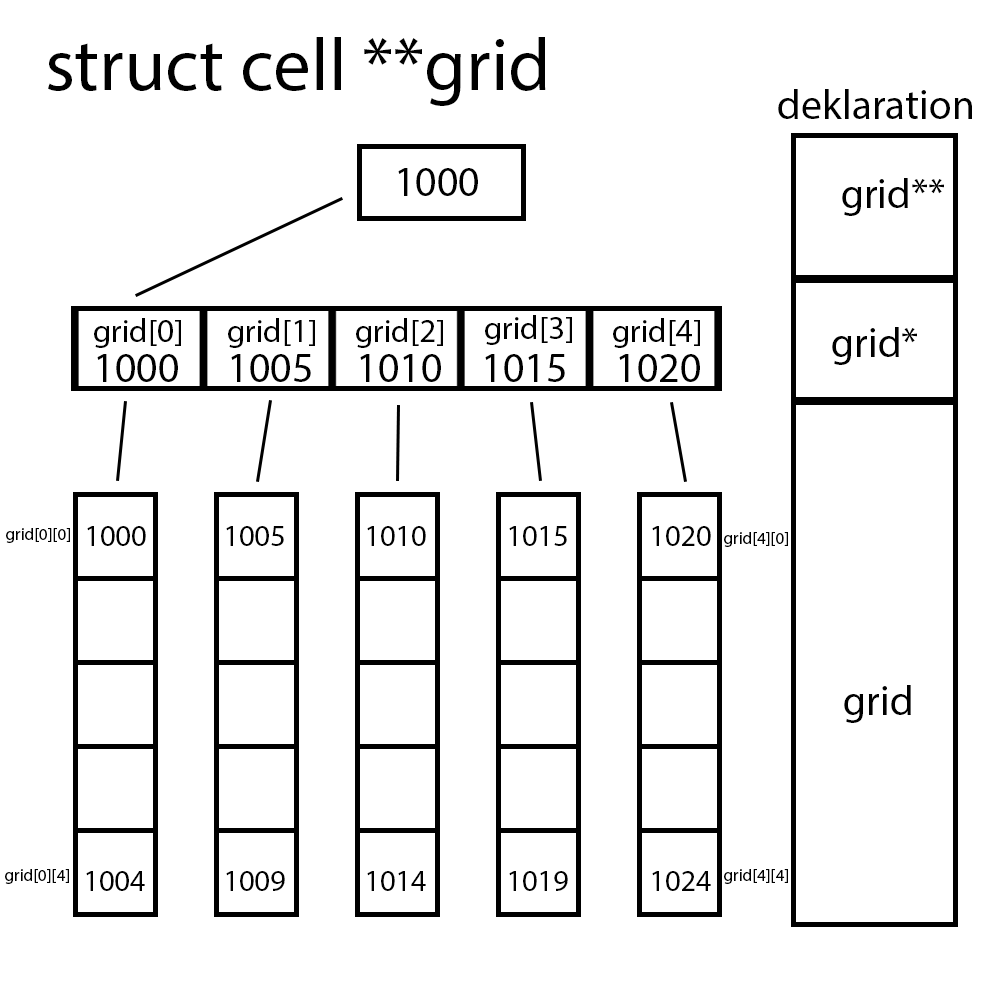
<style>
.page{position:relative;width:1000px;height:1000px;background:#ffffff}
.page>*{position:absolute;margin:0}
.t1{font:75px "MyriadPro-Regular";color:#000000}
.t2{font:41.7px "MyriadPro-Regular";color:#000000}
.t3{font:32.8px "MyriadPro-Regular";color:#000000}
.t4{font:17px "MyriadPro-Regular";color:#000000}
.t5{font:30.3px "MyriadPro-Regular";color:#000000}
</style>
<div class="page">
<p class="t1" style="left:48px;top:37px;width:498px;height:69px">struct cell **grid</p>
<p class="t2" style="left:778px;top:89px;width:194px;height:30px">deklaration</p>
<p class="t2" style="left:398px;top:168px;width:80px;height:28px">1000</p>
<p class="t2" style="left:842px;top:178px;width:102px;height:38px">grid**</p>
<p class="t3" style="left:94px;top:318px;width:87px;height:30px">grid[0]</p>
<p class="t3" style="left:228px;top:318px;width:87px;height:30px">grid[1]</p>
<p class="t3" style="left:356px;top:318px;width:87px;height:30px">grid[2]</p>
<p class="t3" style="left:485px;top:315px;width:87px;height:30px">grid[3]</p>
<p class="t3" style="left:613px;top:318px;width:87px;height:30px">grid[4]</p>
<p class="t2" style="left:832px;top:327px;width:85px;height:38px">grid*</p>
<p class="t2" style="left:97px;top:354px;width:81px;height:28px">1000</p>
<p class="t2" style="left:231px;top:354px;width:80px;height:28px">1005</p>
<p class="t2" style="left:360px;top:354px;width:81px;height:28px">1010</p>
<p class="t2" style="left:485px;top:354px;width:80px;height:28px">1015</p>
<p class="t2" style="left:619px;top:354px;width:81px;height:28px">1020</p>
<p class="t4" style="left:6px;top:528px;width:64px;height:15px">grid[0][0]</p>
<p class="t5" style="left:87px;top:526px;width:59px;height:20px">1000</p>
<p class="t5" style="left:226px;top:526px;width:58px;height:20px">1005</p>
<p class="t5" style="left:367px;top:526px;width:59px;height:20px">1010</p>
<p class="t5" style="left:509px;top:526px;width:58px;height:20px">1015</p>
<p class="t5" style="left:652px;top:526px;width:59px;height:20px">1020</p>
<p class="t4" style="left:724px;top:532px;width:64px;height:15px">grid[4][0]</p>
<p class="t2" style="left:844px;top:685px;width:67px;height:38px">grid</p>
<p class="t4" style="left:5px;top:869px;width:64px;height:15px">grid[0][4]</p>
<p class="t4" style="left:724px;top:869px;width:64px;height:15px">grid[4][4]</p>
<p class="t5" style="left:86px;top:871px;width:59px;height:20px">1004</p>
<p class="t5" style="left:226px;top:871px;width:59px;height:20px">1009</p>
<p class="t5" style="left:367px;top:871px;width:59px;height:20px">1014</p>
<p class="t5" style="left:509px;top:871px;width:59px;height:20px">1019</p>
<p class="t5" style="left:652px;top:871px;width:59px;height:20px">1024</p>
</div>
